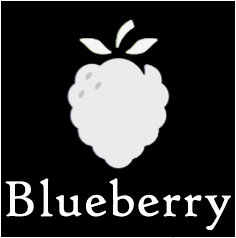
<style>
.page{position:relative;width:236px;height:238px;background:#000000}
.page>*{position:absolute;margin:0}
.t1{font:53.8px "HighTowerText-Reg";letter-spacing:0.02em;color:#ffffff}
</style>
<div class="page">
<p class="t1" style="left:5px;top:178px;width:226px;height:52px">Blueberry</p>
</div>
